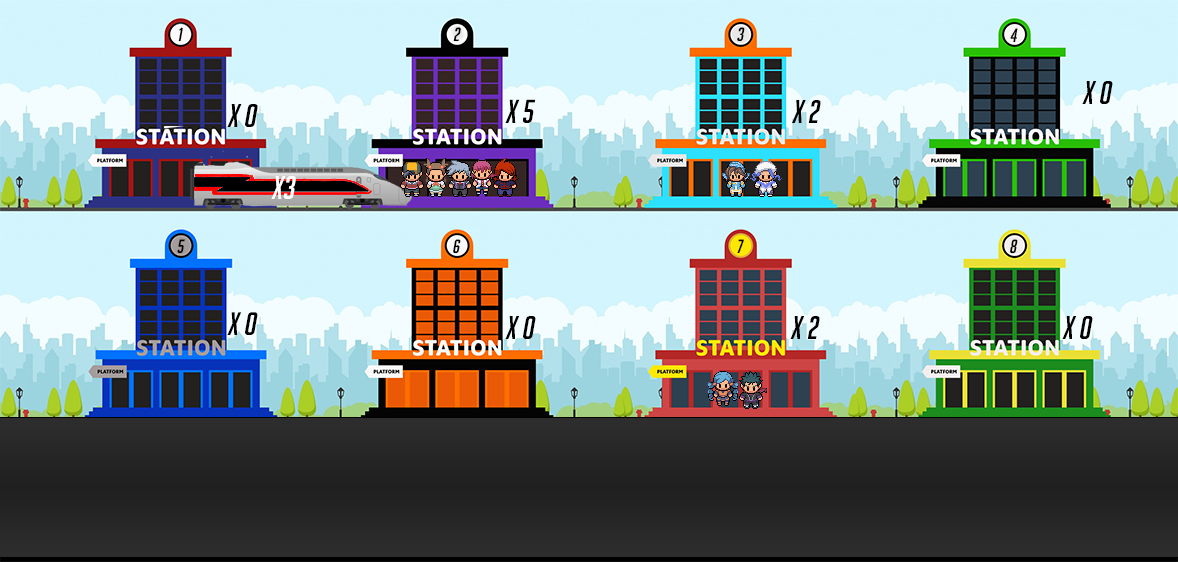
<style>
.page{position:relative;width:1178px;height:562px}
.page>*{position:absolute;margin:0}
.t1{font:18.7px "BigNoodleTitling";color:#010101;font-style:italic}
.t2{font:18.7px "BigNoodleTitling";color:#000000;font-style:italic}
.t3{font:32px "BigNoodleTitling";color:#000000;font-style:italic}
.t4{font:32.4px "BigNoodleTitling";color:#000000;font-style:italic}
.t5{font:32px "BigNoodleTitling";color:#ffffff;font-style:italic}
.t6{font:31.8px "BigNoodleTitling";color:#000000;font-style:italic}
</style>
<div class="page">
<p class="t1" style="left:178px;top:27px;width:5px;height:15px">1</p>
<p class="t1" style="left:453px;top:27px;width:8px;height:15px">2</p>
<p class="t2" style="left:737px;top:27px;width:8px;height:15px">3</p>
<p class="t2" style="left:1010px;top:28px;width:8px;height:15px">4</p>
<p class="t3" style="left:1082px;top:81px;width:31px;height:23px">x 0</p>
<p class="t4" style="left:505px;top:99px;width:31px;height:24px">x 5</p>
<p class="t3" style="left:792px;top:100px;width:29px;height:23px">x 2</p>
<p class="t3" style="left:227px;top:104px;width:31px;height:23px">X 0</p>
<p class="t5" style="left:271px;top:176px;width:25px;height:23px">x3</p>
<p class="t2" style="left:177px;top:239px;width:8px;height:15px">5</p>
<p class="t2" style="left:453px;top:239px;width:8px;height:15px">6</p>
<p class="t2" style="left:737px;top:239px;width:7px;height:15px">7</p>
<p class="t2" style="left:1010px;top:239px;width:8px;height:15px">8</p>
<p class="t6" style="left:227px;top:312px;width:31px;height:23px">x 0</p>
<p class="t3" style="left:505px;top:316px;width:31px;height:23px">x 0</p>
<p class="t3" style="left:790px;top:316px;width:30px;height:23px">x 2</p>
<p class="t3" style="left:1062px;top:316px;width:31px;height:23px">x 0</p>
</div>
